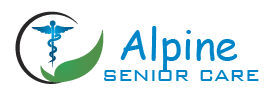
<style>
.page{position:relative;width:280px;height:100px;background:#ffffff}
.page>*{position:absolute;margin:0}
.t1{font:41.7px "ComicSansMS";color:#0086c8}
.t2{font:25px "BankGothic-Light";color:#0086c8}
</style>
<div class="page">
<p class="t1" style="left:120px;top:26px;width:118px;height:46px">Alpine</p>
<p class="t2" style="left:104px;top:70px;width:155px;height:11px">senior care</p>
</div>
